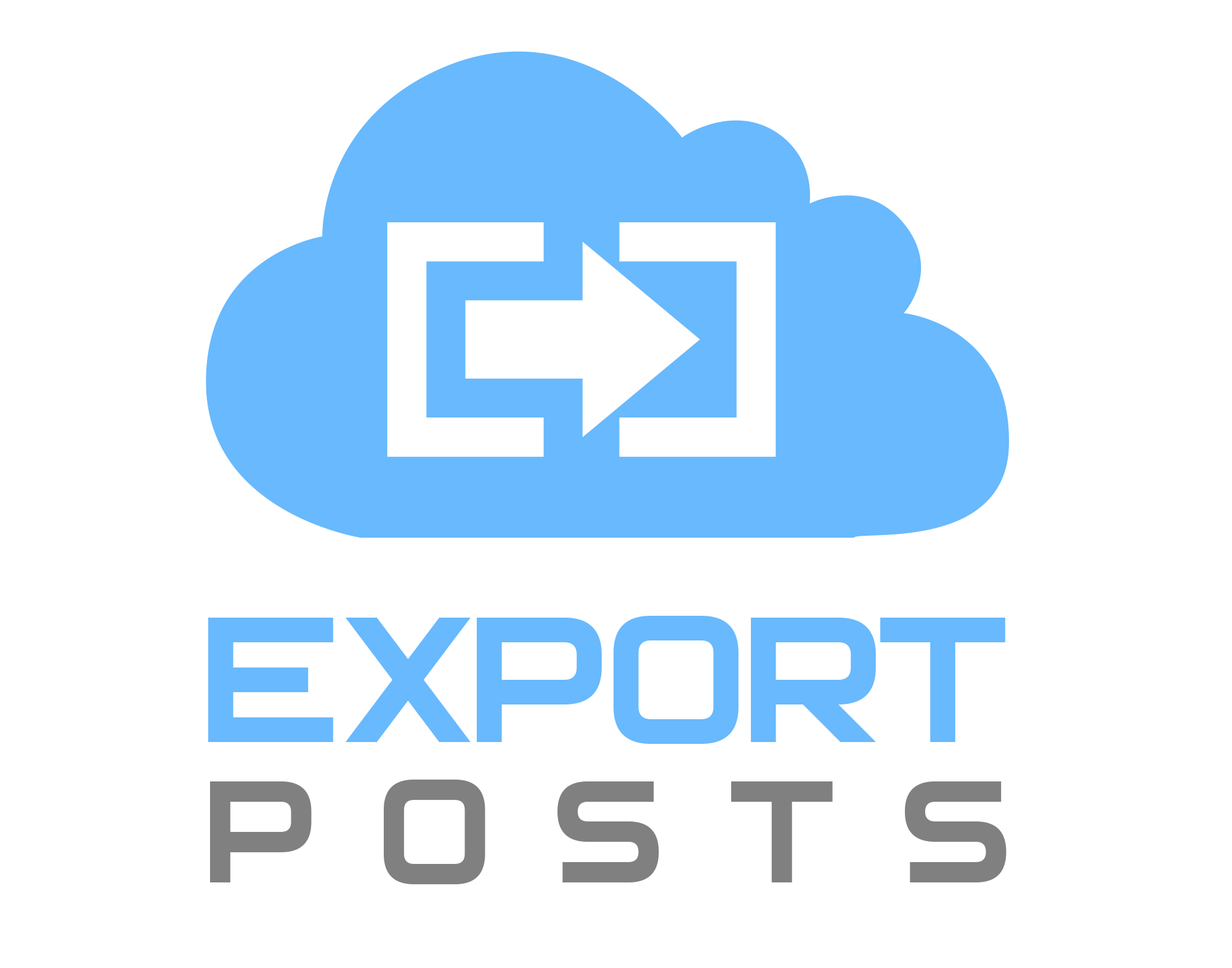
<style>
.page{position:relative;width:1232px;height:968px;background:#ffffff}
.page>*{position:absolute;margin:0}
.t1{font:207.8px/140.4px "Archangelsk";color:#68b9fd;text-transform:uppercase}
.t2{font:168.4px/140.4px "Archangelsk";letter-spacing:0.37em;color:#808080;text-transform:uppercase}
</style>
<div class="page">
<p class="t1" style="left:208px;top:616px;width:798px;height:268px;text-align:center">export<br><span class="t2">posts</span></p>
</div>
